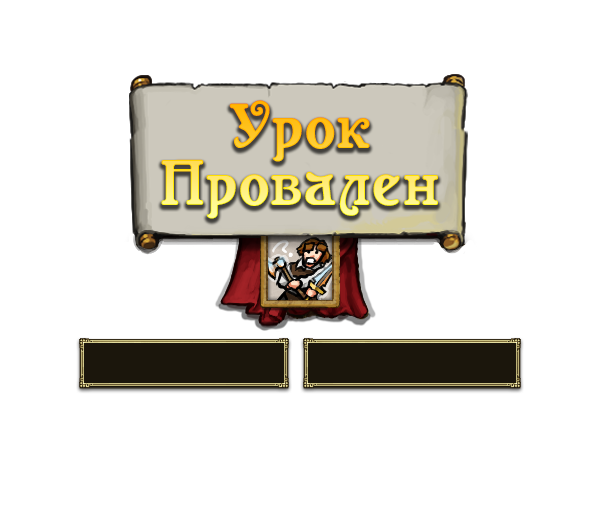
<style>
.page{position:relative;width:600px;height:528px;background:#ffffff}
.page>*{position:absolute;margin:0}
.t1{font:64px/57px "Casanova";letter-spacing:0.03em}
</style>
<div class="page">
<p class="t1" style="left:161px;top:100px;width:277px;height:119px;text-align:center">Урок<br>Провален</p>
</div>
